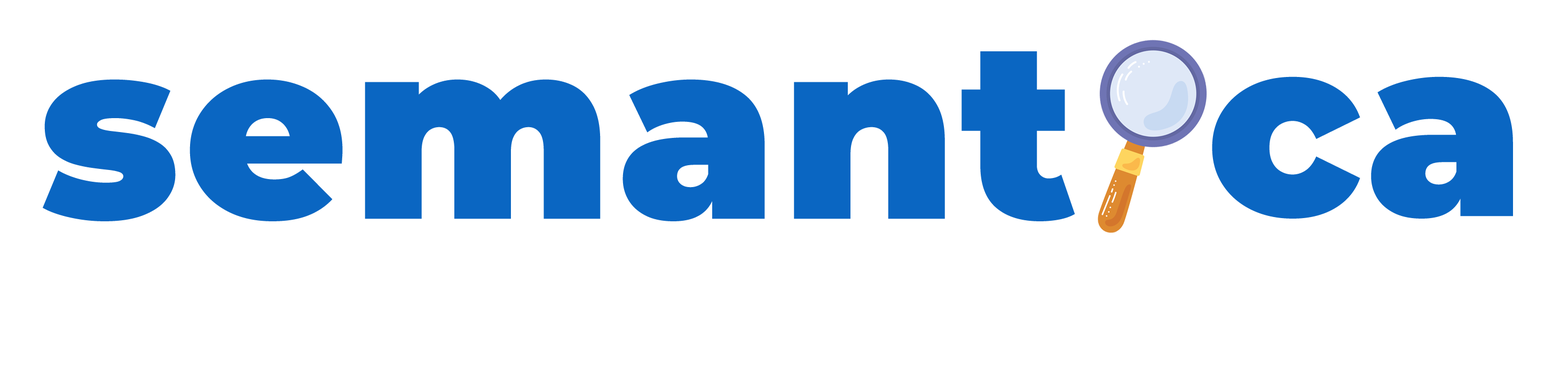
<style>
.page{position:relative;width:1568px;height:387px;background:#ffffff}
.page>*{position:absolute;margin:0}
.t1{font:249.5px "Montserrat-Black";letter-spacing:0.02em;color:#0a66c2}
</style>
<div class="page">
<p class="t1" style="left:43px;top:51px;width:1032px;height:170px">semant</p>
<p class="t1" style="left:1212px;top:76px;width:301px;height:142px">ca</p>
</div>
